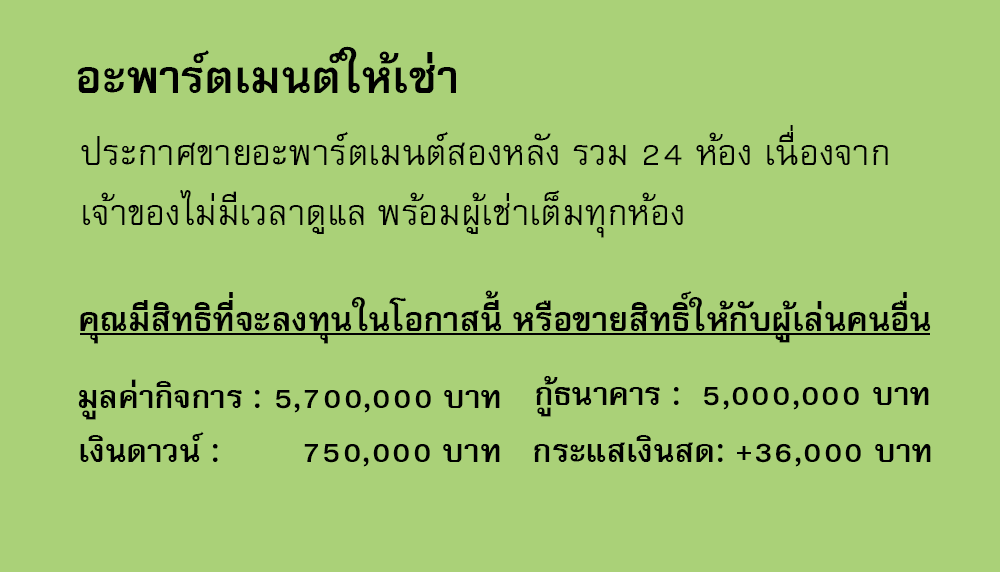
<style>
.page{position:relative;width:1000px;height:572px;background:#aad178}
.page>*{position:absolute;margin:0}
.t1{font:64px "FreesiaUPCBold";color:#000000}
.t2{font:50px/60px "FreesiaUPC";color:#000000}
.t3{font:47px "FreesiaUPCBold";color:#000000}
.t4{font:45px "FreesiaUPCBold";color:#000000}
</style>
<div class="page">
<p class="t1" style="left:77px;top:46px;width:379px;height:47px">อะพาร์ตเมนต์ให้เช่า</p>
<p class="t2" style="left:81px;top:125px;width:807px;height:113px">ประกาศขายอะพาร์ตเมนต์สองหลัง รวม 24 ห้อง เนื่องจาก<br>เจ้าของไม่มีเวลาดูแล พร้อมผู้เช่าเต็มทุกห้อง</p>
<p class="t3" style="left:80px;top:290px;width:851px;height:54px">คุณมีสิทธิที่จะลงทุนในโอกาสนี้ หรือขายสิทธิ์ให้กับผู้เล่นคนอื่น</p>
<p class="t4" style="left:536px;top:376px;width:393px;height:41px">กู้ธนาคาร :  5,000,000 บาท</p>
<p class="t4" style="left:78px;top:379px;width:422px;height:41px">มูลค่ากิจการ : 5,700,000 บาท</p>
<p class="t4" style="left:80px;top:431px;width:420px;height:36px">เงินดาวน์ :        750,000 บาท</p>
<p class="t4" style="left:534px;top:435px;width:397px;height:32px">กระแสเงินสด: +36,000 บาท</p>
</div>
